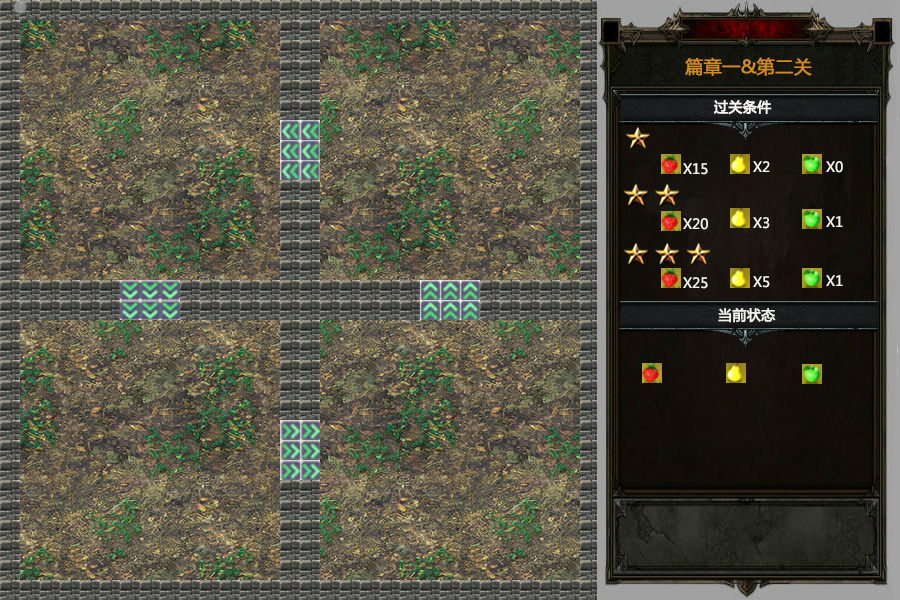
<style>
.page{position:relative;width:900px;height:600px}
.page>*{position:absolute;margin:0}
.t1{font:18px "MicrosoftYaHei";color:#cf8b20;font-weight:bold}
.t2{font:14px "MicrosoftYaHei";color:#f9f3f3;font-weight:bold}
.t3{font:14px "MicrosoftYaHei";color:#f1f0e9}
.t4{font:14px "MicrosoftYaHei";color:#f1f0e9;font-weight:bold}
</style>
<div class="page">
<p class="t1" style="left:685px;top:57px;width:127px;height:19px">篇章一&amp;第二关</p>
<p class="t2" style="left:714px;top:100px;width:58px;height:15px">过关条件</p>
<p class="t3" style="left:753px;top:161px;width:17px;height:11px">X2</p>
<p class="t3" style="left:826px;top:161px;width:17px;height:12px">X0</p>
<p class="t3" style="left:683px;top:163px;width:25px;height:12px">X15</p>
<p class="t3" style="left:683px;top:218px;width:25px;height:12px">X20</p>
<p class="t3" style="left:753px;top:217px;width:17px;height:12px">X3</p>
<p class="t3" style="left:826px;top:216px;width:17px;height:11px">X1</p>
<p class="t3" style="left:683px;top:277px;width:25px;height:12px">X25</p>
<p class="t3" style="left:753px;top:276px;width:17px;height:12px">X5</p>
<p class="t3" style="left:826px;top:275px;width:17px;height:11px">X1</p>
<p class="t4" style="left:718px;top:308px;width:58px;height:15px">当前状态</p>
</div>
